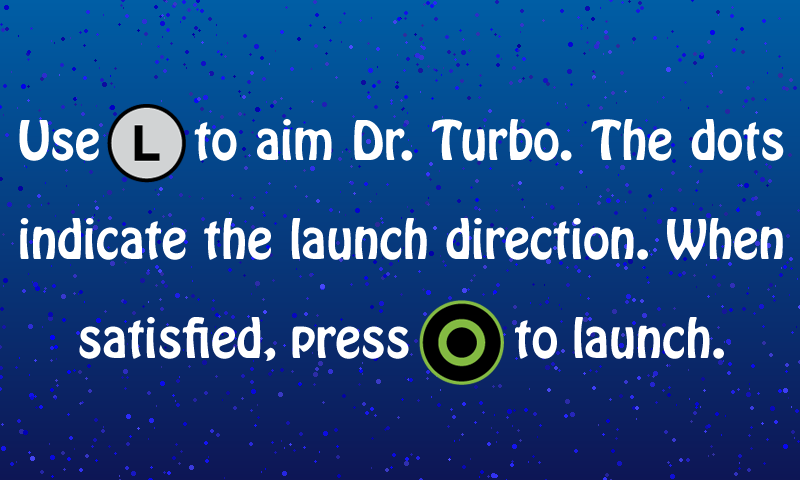
<style>
.page{position:relative;width:800px;height:480px}
.page>*{position:absolute;margin:0}
.t1{font:48px/99px "HoboStd";color:#ffffff}
</style>
<div class="page">
<p class="t1" style="left:19px;top:119px;width:765px;height:242px;text-align:justify">Use LS to aim Dr. Turbo. The dots indicate the launch direction. When satisfied, press    O to launch.</p>
</div>
